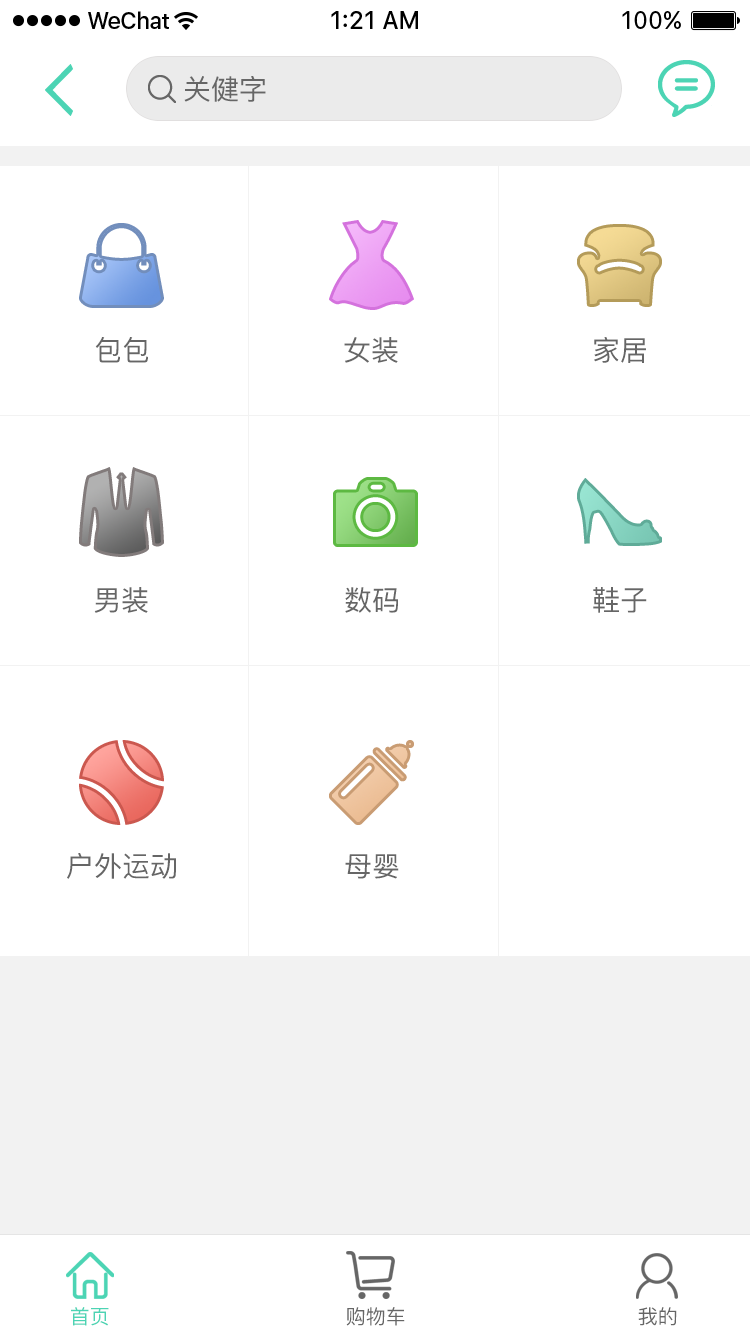
<style>
.page{position:relative;width:750px;height:1334px;background:#ffffff}
.page>*{position:absolute;margin:0}
.t1{font:28px "PingFang-SC-Medium";color:#666666}
.t2{font:20px "PingFang-SC-Medium";color:#4cd4b4}
.t3{font:20px "PingFang-SC-Medium";color:#666666}
</style>
<div class="page">
<p class="t1" style="left:184px;top:76px;width:82px;height:26px">关健字</p>
<p class="t1" style="left:95px;top:337px;width:53px;height:26px">包包</p>
<p class="t1" style="left:344px;top:337px;width:54px;height:26px">女装</p>
<p class="t1" style="left:594px;top:337px;width:52px;height:26px">家居</p>
<p class="t1" style="left:94px;top:587px;width:54px;height:26px">男装</p>
<p class="t1" style="left:345px;top:587px;width:53px;height:26px">数码</p>
<p class="t1" style="left:593px;top:587px;width:54px;height:26px">鞋子</p>
<p class="t1" style="left:67px;top:853px;width:109px;height:26px">户外运动</p>
<p class="t1" style="left:345px;top:854px;width:54px;height:25px">母婴</p>
<p class="t2" style="left:71px;top:1307px;width:38px;height:19px">首页</p>
<p class="t3" style="left:346px;top:1307px;width:59px;height:19px">购物车</p>
<p class="t3" style="left:638px;top:1307px;width:39px;height:19px">我的</p>
</div>
